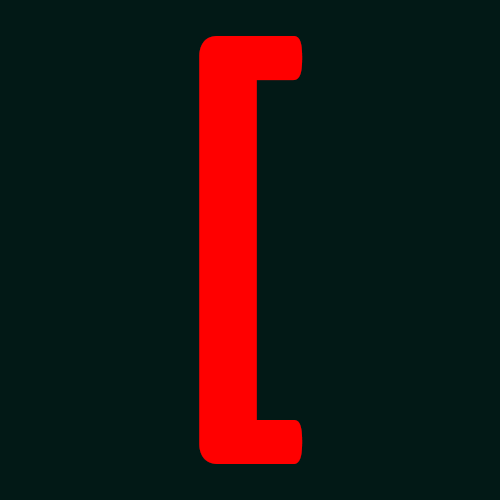
<style>
.page{position:relative;width:500px;height:500px;background:#021916}
.page>*{position:absolute;margin:0}
.t1{font:500px "Calibri-Bold";color:#ff0000}
</style>
<div class="page">
<p class="t1" style="left:199px;top:36px;width:104px;height:428px">[</p>
</div>
